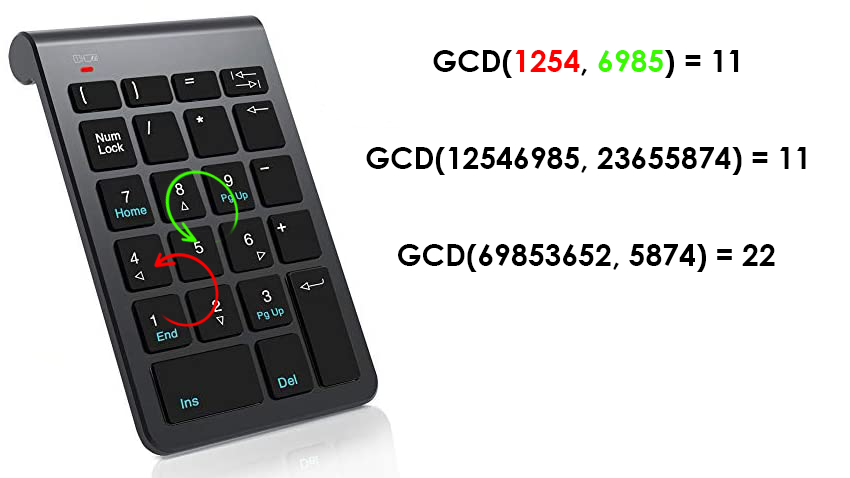
<style>
.page{position:relative;width:850px;height:478px;background:#ffffff}
.page>*{position:absolute;margin:0}
.t1{font:30px "CenturyGothic-Bold";color:#000000}
.t2{font:30px "CenturyGothic-Bold";color:#fd0000}
.t3{font:30px "CenturyGothic-Bold";color:#3bf901}
</style>
<div class="page">
<p class="t1" style="left:433px;top:50px;width:306px;height:28px">GCD(<span class="t2">1254</span>, <span class="t3">6985</span>) = 11</p>
<p class="t1" style="left:366px;top:147px;width:440px;height:28px">GCD(12546985, 23655874) = 11</p>
<p class="t1" style="left:398px;top:244px;width:377px;height:28px">GCD(69853652, 5874) = 22</p>
</div>
